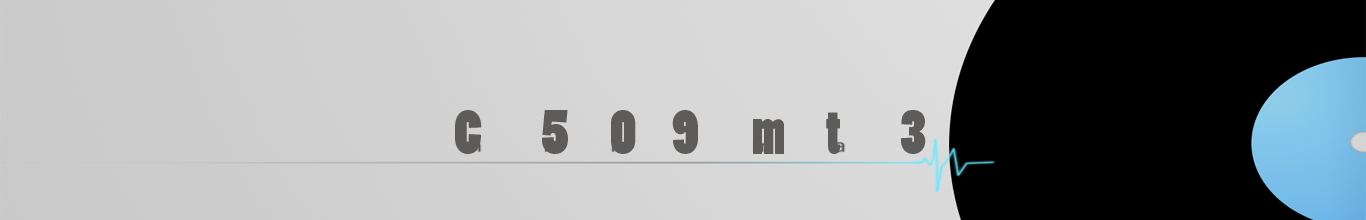
<style>
.page{position:relative;width:1366px;height:220px;background:#000000}
.page>*{position:absolute;margin:0}
.t1{font:59px "PoplarStd";color:#5e5b5b}
</style>
<div class="page">
<p class="t1" style="left:455px;top:110px;width:471px;height:44px">C          5       0      9         m       t          3</p>
</div>
